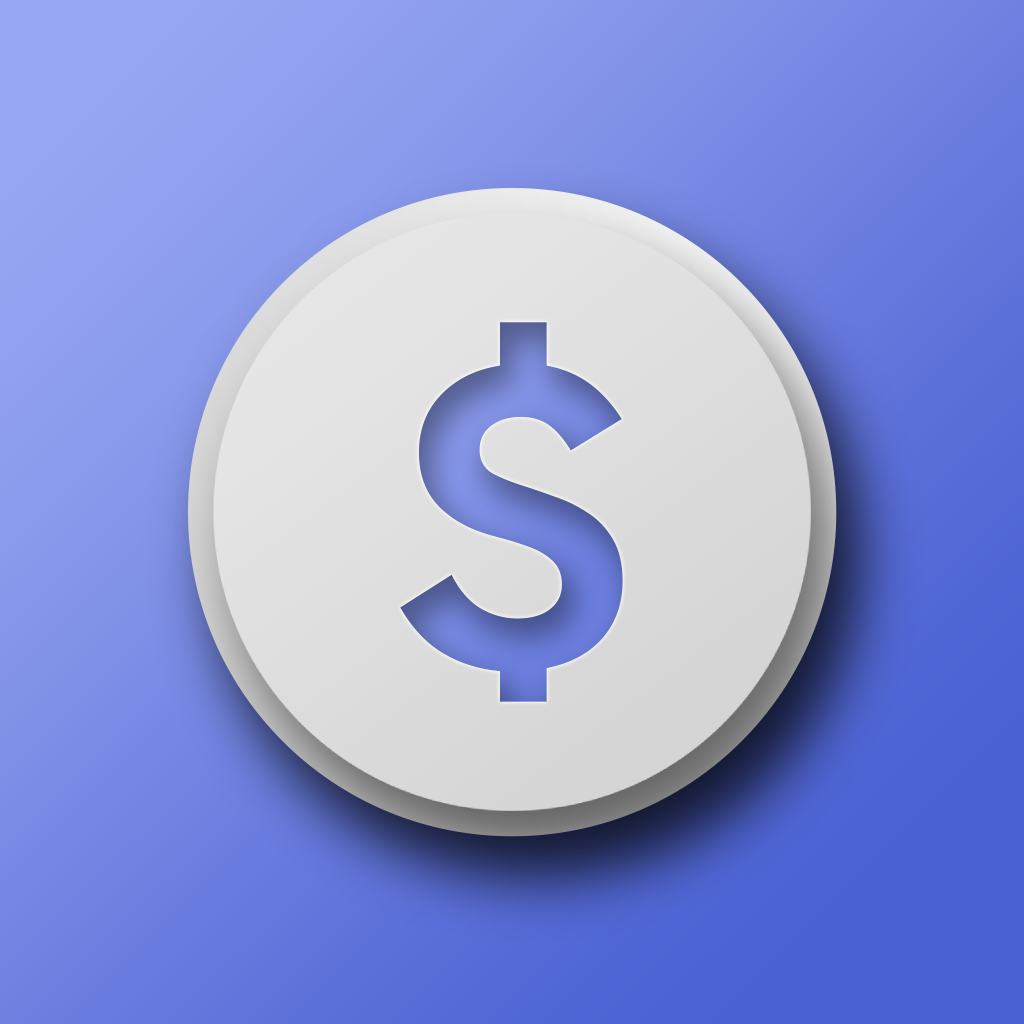
<style>
.page{position:relative;width:1024px;height:1024px}
.page>*{position:absolute;margin:0}
.t1{font:424.4px "CalSans-Regular"}
</style>
<div class="page">
<p class="t1" style="left:400px;top:322px;width:223px;height:380px">$</p>
</div>
